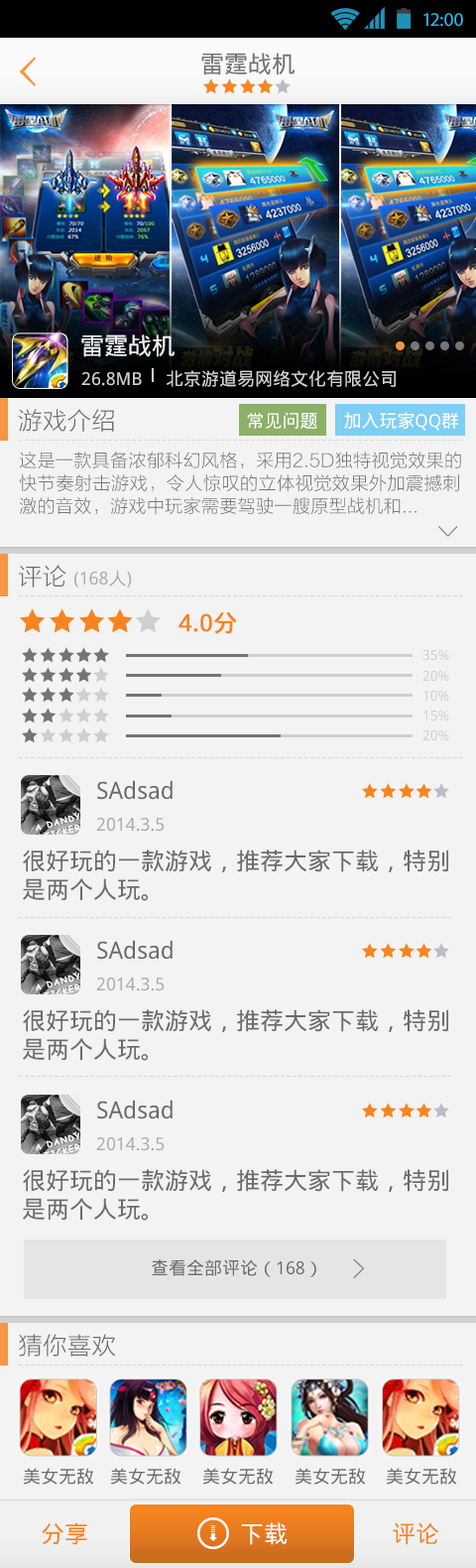
<style>
.page{position:relative;width:476px;height:1568px;background:#f3f3f3}
.page>*{position:absolute;margin:0}
.t1{font:19.2px "MyriadPro-Regular";color:#33b5e5}
.t2{font:23.8px "DroidSansFallback";color:#737373}
.t3{font:23.8px "DroidSansFallback";color:#f1f1f1}
.t4{font:17.9px "DroidSansFallback";color:#d1d1d1}
.t5{font:23.8px "STHeitiSC-Medium";color:#7a7a7a}
.t6{font:17.9px "DroidSansFallback";color:#ffffff}
.t7{font:17.9px/22.8px "STHeitiSC-Medium";color:#787878}
.t8{font:23.8px "STHeitiSC-Medium";color:#6b6b6b}
.t9{font:17.9px "DroidSansFallback";color:#ababab}
.t10{font:23.8px "DroidSansFallback";color:#ababab}
.t11{font:23.8px "DroidSansFallback";color:#f68521;font-weight:bold}
.t12{font:13.9px "DroidSansFallback";color:#cfcfcf}
.t13{font:23.8px "DroidSansFallback";color:#6b6b6b}
.t14{font:17.9px "DroidSansFallback";color:#6b6b6b}
.t15{font:23.8px "DroidSansFallback";color:#f68521}
.t16{font:23.8px "DroidSansFallback";color:#ffffff}
</style>
<div class="page">
<p class="t1" style="left:424px;top:13px;width:39px;height:14px">12:00</p>
<p class="t2" style="left:201px;top:53px;width:94px;height:22px">雷霆战机</p>
<p class="t3" style="left:81px;top:334px;width:94px;height:23px">雷霆战机</p>
<p class="t4" style="left:81px;top:370px;width:315px;height:17px">26.8MB     北京游道易网络文化有限公司</p>
<p class="t5" style="left:19px;top:409px;width:95px;height:23px">游戏介绍</p>
<p class="t6" style="left:247px;top:412px;width:71px;height:17px">常见问题</p>
<p class="t6" style="left:344px;top:412px;width:114px;height:19px">加入玩家QQ群</p>
<p class="t7" style="left:19px;top:452px;width:442px;height:63px">这是一款具备浓郁科幻风格，采用2.5D独特视觉效果的<br>快节奏射击游戏，令人惊叹的立体视觉效果外加震撼刺<br>激的音效，游戏中玩家需要驾驶一艘原型战机和...</p>
<p class="t8" style="left:19px;top:565px;width:47px;height:23px">评论</p>
<p class="t9" style="left:74px;top:570px;width:58px;height:18px"><span class="t10"> </span>(168人)</p>
<p class="t11" style="left:179px;top:611px;width:58px;height:23px">4.0分</p>
<p class="t12" style="left:423px;top:650px;width:27px;height:10px">35%</p>
<p class="t12" style="left:423px;top:670px;width:27px;height:11px">20%</p>
<p class="t12" style="left:424px;top:690px;width:26px;height:11px">10%</p>
<p class="t12" style="left:424px;top:711px;width:26px;height:9px">15%</p>
<p class="t12" style="left:423px;top:729px;width:27px;height:11px">20%</p>
<p class="t13" style="left:97px;top:780px;width:76px;height:20px">SAdsad</p>
<p class="t9" style="left:96px;top:818px;width:69px;height:14px">2014.3.5</p>
<p class="t13" style="left:23px;top:849px;width:426px;height:52px">很好玩的一款游戏，推荐大家下载，特别<br>是两个人玩。</p>
<p class="t13" style="left:97px;top:940px;width:76px;height:20px">SAdsad</p>
<p class="t9" style="left:96px;top:978px;width:69px;height:13px">2014.3.5</p>
<p class="t13" style="left:23px;top:1009px;width:426px;height:52px">很好玩的一款游戏，推荐大家下载，特别<br>是两个人玩。</p>
<p class="t13" style="left:97px;top:1100px;width:76px;height:19px">SAdsad</p>
<p class="t9" style="left:96px;top:1137px;width:69px;height:14px">2014.3.5</p>
<p class="t13" style="left:23px;top:1169px;width:426px;height:52px">很好玩的一款游戏，推荐大家下载，特别<br>是两个人玩。</p>
<p class="t14" style="left:152px;top:1259px;width:165px;height:18px">查看全部评论（168）</p>
<p class="t8" style="left:19px;top:1334px;width:96px;height:23px">猜你喜欢</p>
<p class="t14" style="left:24px;top:1468px;width:70px;height:17px">美女无敌</p>
<p class="t14" style="left:111px;top:1468px;width:71px;height:17px">美女无敌</p>
<p class="t14" style="left:203px;top:1468px;width:71px;height:17px">美女无敌</p>
<p class="t14" style="left:296px;top:1468px;width:70px;height:17px">美女无敌</p>
<p class="t14" style="left:387px;top:1468px;width:70px;height:17px">美女无敌</p>
<p class="t15" style="left:42px;top:1522px;width:45px;height:23px">分享</p>
<p class="t16" style="left:241px;top:1522px;width:47px;height:23px">下载</p>
<p class="t15" style="left:393px;top:1522px;width:46px;height:23px">评论</p>
</div>
